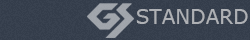
<style>
.page{position:relative;width:250px;height:40px;background:#343d4b}
.page>*{position:absolute;margin:0}
.t1{font:20px "Verdana";color:#aeb1b5}
</style>
<div class="page">
<p class="t1" style="left:136px;top:9px;width:112px;height:15px">STANDARD</p>
</div>
